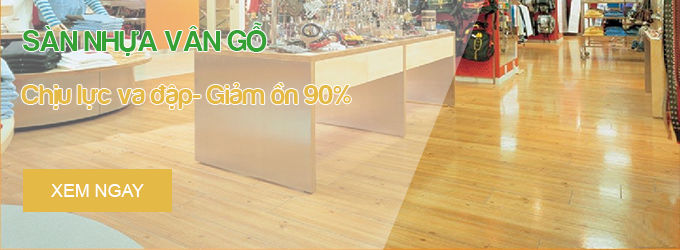
<style>
.page{position:relative;width:680px;height:250px}
.page>*{position:absolute;margin:0}
.t1{font:30px "FS-Harabara";color:#35a135}
.t2{font:28px "FS-Harabara";color:#e5b946}
.t3{font:17.8px "ArialMT";color:#ffffff}
</style>
<div class="page">
<p class="t1" style="left:23px;top:22px;width:244px;height:34px">SÀN NHỰA VÂN GỖ</p>
<p class="t2" style="left:21px;top:83px;width:330px;height:26px">Chịu lực va đập- Giảm ồn 90%</p>
<p class="t3" style="left:51px;top:184px;width:93px;height:13px">XEM NGAY</p>
</div>
